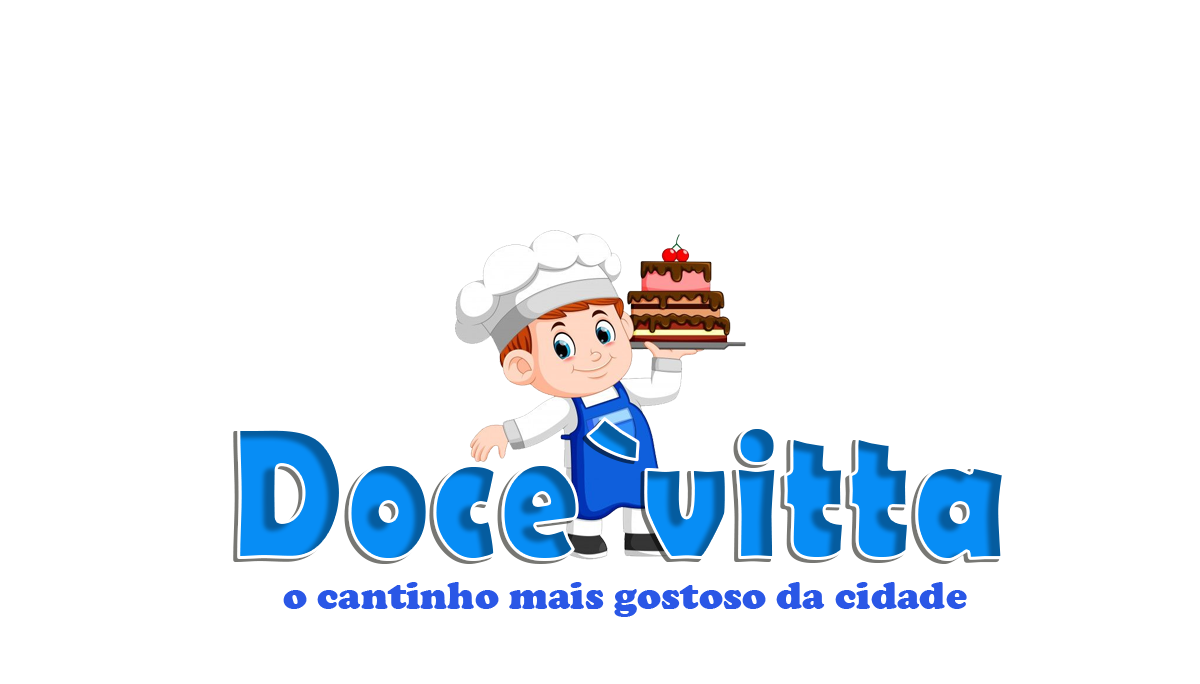
<style>
.page{position:relative;width:1200px;height:684px;background:#ffffff}
.page>*{position:absolute;margin:0}
.t1{font:191.2px "BerlinSansFB-Bold";scale:0.81 1}
.t2{font:40.1px "CooperBlack";color:#2a57e6}
</style>
<div class="page">
<p class="t1" style="left:237px;top:417px;width:768px;height:144px">Doce`vitta</p>
<p class="t2" style="left:283px;top:582px;width:684px;height:35px">o cantinho mais gostoso da cidade</p>
</div>
